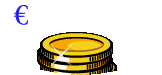
<style>
.page{position:relative;width:162px;height:75px;background:#ffffff}
.page>*{position:absolute;margin:0}
.t1{font:30px "Garamond";letter-spacing:0.2em;color:#241ff6}
</style>
<div class="page">
<p class="t1" style="left:14px;top:5px;width:15px;height:20px">€</p>
</div>
